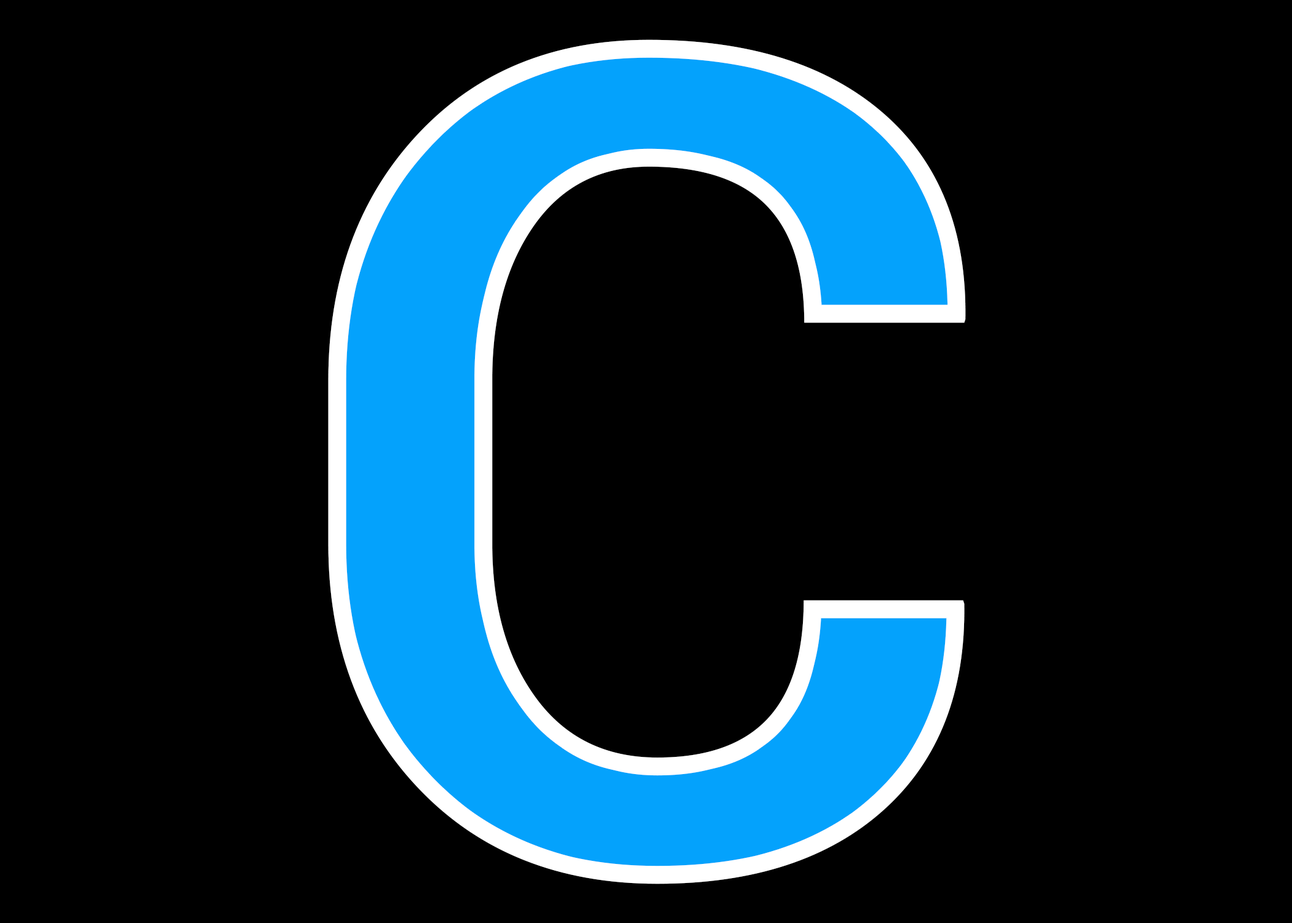
<style>
.page{position:relative;width:1292px;height:923px;background:#000000}
.page>*{position:absolute;margin:0}
.t1{font:1153.6px "Roboto-Bold";color:#04a2fc}
</style>
<div class="page">
<p class="t1" style="left:328px;top:39px;width:638px;height:845px">C</p>
</div>
